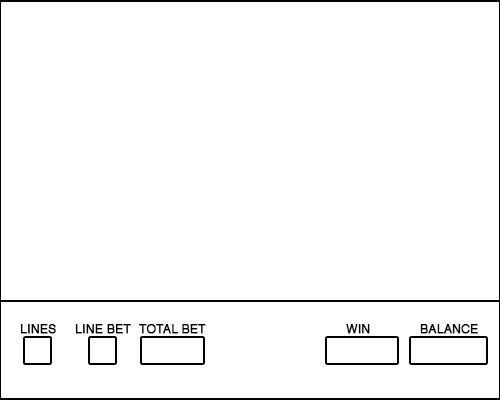
<style>
.page{position:relative;width:500px;height:400px;background:#ffffff}
.page>*{position:absolute;margin:0}
.t1{font:12px "Helvetica";color:#000000;font-weight:bold}
</style>
<div class="page">
<p class="t1" style="left:20px;top:324px;width:36px;height:10px">LINES</p>
<p class="t1" style="left:75px;top:324px;width:56px;height:10px">LINE BET</p>
<p class="t1" style="left:139px;top:324px;width:67px;height:10px">TOTAL BET</p>
<p class="t1" style="left:346px;top:324px;width:24px;height:10px">WIN</p>
<p class="t1" style="left:420px;top:324px;width:58px;height:10px">BALANCE</p>
</div>
